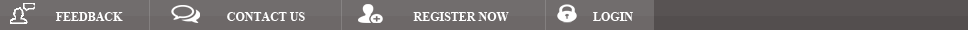
<style>
.page{position:relative;width:968px;height:30px;background:#716d6d}
.page>*{position:absolute;margin:0}
.t1{font:12px "TimesNewRomanPS-BoldMT";color:#ffffff}
</style>
<div class="page">
<p class="t1" style="left:55px;top:12px;width:68px;height:9px">FEEDBACK</p>
<p class="t1" style="left:227px;top:12px;width:78px;height:9px">CONTACT US</p>
<p class="t1" style="left:413px;top:12px;width:96px;height:9px">REGISTER NOW</p>
<p class="t1" style="left:593px;top:12px;width:40px;height:9px">LOGIN</p>
</div>
